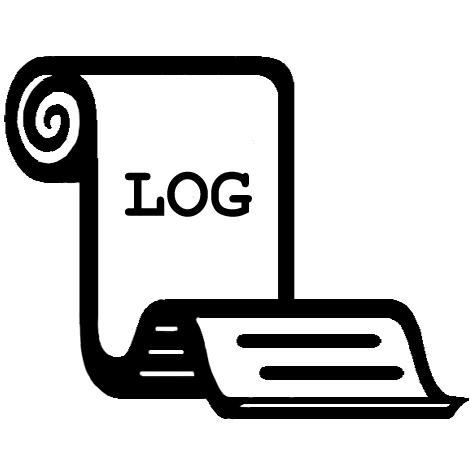
<style>
.page{position:relative;width:470px;height:470px;background:#ffffff}
.page>*{position:absolute;margin:0}
.t1{font:72px "CourierNewPS-BoldMT";color:#000000}
</style>
<div class="page">
<p class="t1" style="left:125px;top:171px;width:127px;height:46px">LOG</p>
</div>
